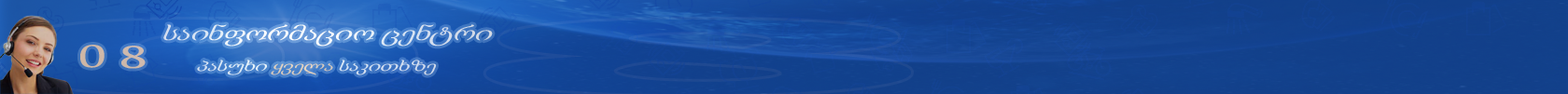
<style>
.page{position:relative;width:1568px;height:94px}
.page>*{position:absolute;margin:0}
.t1{font:24.3px "Sylfaen";scale:1.28 1}
.t2{font:32.7px "Sylfaen";color:#ceb8aa;scale:1.66 1}
.t3{font:16.8px "Sylfaen";color:#d8e0f1;scale:1.28 1}
</style>
<div class="page">
<p class="t1" style="left:163px;top:24px;width:330px;height:23px">საინფორმაციო ცენტრი</p>
<p class="t2" style="left:80px;top:45px;width:66px;height:24px">0 8</p>
<p class="t3" style="left:197px;top:60px;width:240px;height:16px">პასუხი ყველა საკითხზე</p>
</div>
